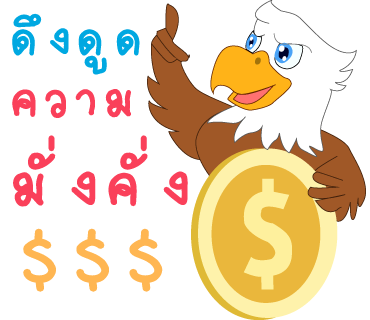
<style>
.page{position:relative;width:370px;height:320px;background:#ffffff}
.page>*{position:absolute;margin:0}
.t1{font:71px "2005_iannnnnMTV";letter-spacing:0.075em;color:#00a8e1;scale:1.06 1}
.t2{font:76px "2005_iannnnnMTV";letter-spacing:0.075em;color:#fa405a;scale:1.06 1}
.t3{font:92px "2005_iannnnnMTV";letter-spacing:0.075em;color:#fa405a;scale:1.06 1}
.t4{font:121px "2005_iannnnnMTV";letter-spacing:0.075em;color:#ffb652;scale:1.06 1}
</style>
<div class="page">
<p class="t1" style="left:12px;top:13px;width:128px;height:62px">ดึงดูด</p>
<p class="t2" style="left:12px;top:89px;width:119px;height:29px">ความ</p>
<p class="t3" style="left:13px;top:135px;width:175px;height:72px">มั่งคั่ง</p>
<p class="t4" style="left:23px;top:228px;width:140px;height:64px">$$$</p>
</div>
